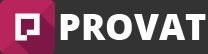
<style>
.page{position:relative;width:208px;height:54px;background:#333333}
.page>*{position:absolute;margin:0}
.t1{font:36px "OpenSans-Extrabold";color:#ffffff}
</style>
<div class="page">
<p class="t1" style="left:60px;top:14px;width:146px;height:26px">PROVAT</p>
</div>
